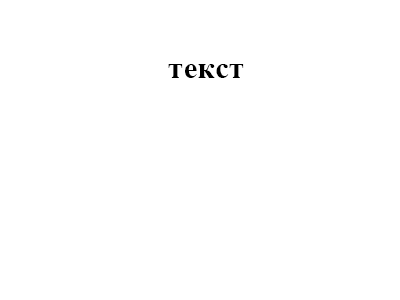
<style>
.page{position:relative;width:400px;height:300px;background:#ffffff}
.page>*{position:absolute;margin:0}
.t1{font:30px "TimesNewRomanPS-BoldMT";letter-spacing:0.025em;color:#000000}
</style>
<div class="page">
<p class="t1" style="left:168px;top:64px;width:76px;height:14px">текст</p>
</div>
